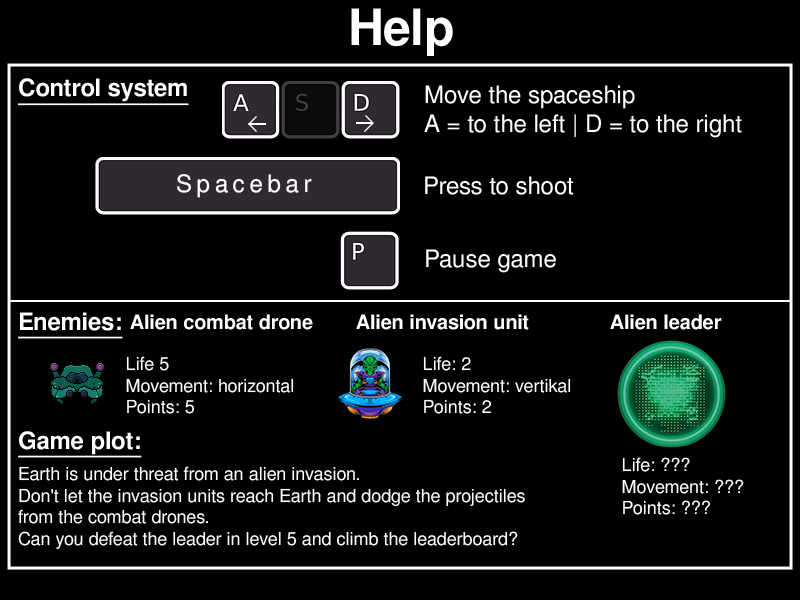
<style>
.page{position:relative;width:800px;height:600px;background:#000000}
.page>*{position:absolute;margin:0}
.t1{font:50px "FreeSansBold";color:#ffffff}
.t2{font:24px "FreeSansBold";color:#ffffff;text-decoration:underline}
.t3{font:24px "FreeSans";color:#ffffff}
.t4{font:24px "FreeSans";letter-spacing:0.2em;color:#ffffff}
.t5{font:20px "FreeSansBold";color:#ffffff}
.t6{font:18px "FreeSans";color:#ffffff}
</style>
<div class="page">
<p class="t1" style="left:351px;top:8px;width:102px;height:48px">Help</p>
<p class="t2" style="left:18px;top:78px;width:171px;height:28px">Control system</p>
<p class="t3" style="left:424px;top:85px;width:318px;height:53px">Move the spaceship <br>A = to the left | D = to the right</p>
<p class="t4" style="left:177px;top:174px;width:135px;height:24px">Spacebar</p>
<p class="t3" style="left:425px;top:176px;width:149px;height:19px">Press to shoot</p>
<p class="t3" style="left:426px;top:249px;width:130px;height:24px">Pause game</p>
<p class="t2" style="left:18px;top:312px;width:105px;height:27px">Enemies:</p>
<p class="t5" style="left:130px;top:314px;width:183px;height:16px">Alien combat drone</p>
<p class="t5" style="left:356px;top:314px;width:173px;height:16px">Alien invasion unit</p>
<p class="t5" style="left:610px;top:314px;width:112px;height:16px">Alien leader</p>
<p class="t6" style="left:126px;top:356px;width:168px;height:58px">Life 5<br>Movement: horizontal<br>Points: 5</p>
<p class="t6" style="left:423px;top:356px;width:148px;height:58px">Life: 2<br>Movement: vertikal<br>Points: 2</p>
<p class="t2" style="left:18px;top:431px;width:124px;height:27px">Game plot:</p>
<p class="t6" style="left:622px;top:457px;width:122px;height:58px">Life: ???<br>Movement: ???<br>Points: ???</p>
<p class="t6" style="left:18px;top:466px;width:507px;height:84px">Earth is under threat from an alien invasion. <br>Don't let the invasion units reach Earth and dodge the projectiles <br>from the combat drones. <br>Can you defeat the leader in level 5 and climb the leaderboard?</p>
</div>
